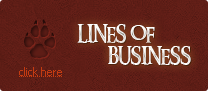
<style>
.page{position:relative;width:208px;height:91px}
.page>*{position:absolute;margin:0}
.t1{font:48px "AnimalTracks";color:#5e1d16}
.t2{font:18px "RingbearerMedium";color:#f5f3f0;text-transform:uppercase}
.t3{font:18px "RingbearerMedium";color:#f7f6f1;text-transform:uppercase}
.t4{font:11px "Tahoma";color:#c53b11}
</style>
<div class="page">
<p class="t1" style="left:24px;top:19px;width:31px;height:40px">i</p>
<p class="t2" style="left:77px;top:24px;width:78px;height:19px">Lines of</p>
<p class="t3" style="left:108px;top:46px;width:83px;height:19px">Business</p>
<p class="t4" style="left:19px;top:67px;width:43px;height:9px">click here</p>
</div>
